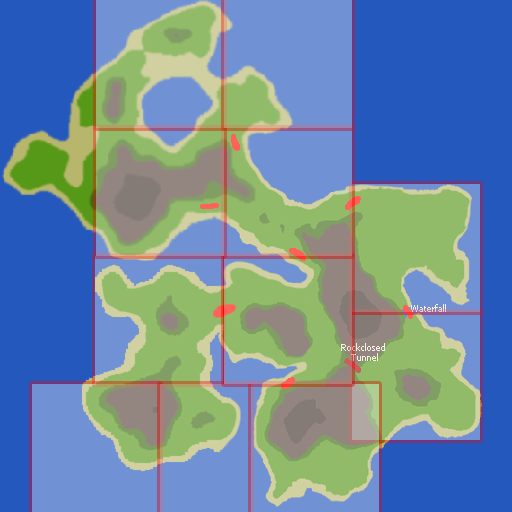
<style>
.page{position:relative;width:512px;height:512px;background:#2458bd}
.page>*{position:absolute;margin:0}
.t1{font:9px "Tahoma"}
.t2{font:9px "Tahoma";color:#f7ebd5}
</style>
<div class="page">
<p class="t1" style="left:411px;top:304px;width:35px;height:8px">Waterfall</p>
<p class="t2" style="left:341px;top:343px;width:44px;height:18px;text-align:center">Rockclosed <br>Tunnel</p>
</div>
